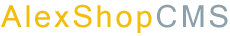
<style>
.page{position:relative;width:230px;height:36px;background:#ffffff}
.page>*{position:absolute;margin:0}
.t1{font:29.4px "Mangal";letter-spacing:0.1em;color:#f2bd0b}
.t2{font:29.4px "Mangal";letter-spacing:0.1em;color:#8c9fab}
</style>
<div class="page">
<p class="t1" style="left:1px;top:4px;width:227px;height:29px">AlexShop<span class="t2">CMS</span></p>
</div>
